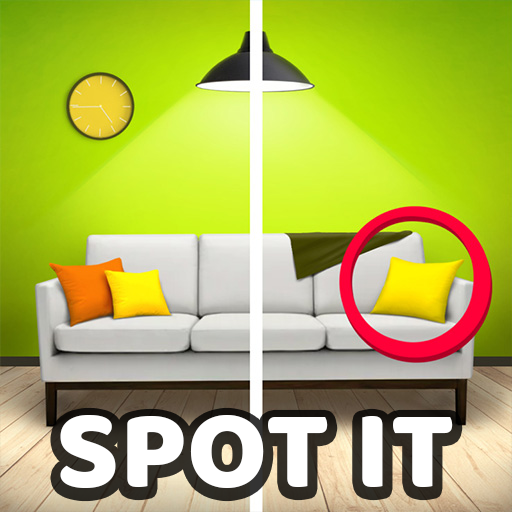
<style>
.page{position:relative;width:512px;height:512px}
.page>*{position:absolute;margin:0}
.t1{font:114px "Baloo-Regular";letter-spacing:0.01em;color:#ffffff}
</style>
<div class="page">
<p class="t1" style="left:60px;top:415px;width:393px;height:73px">SPOT IT</p>
</div>
